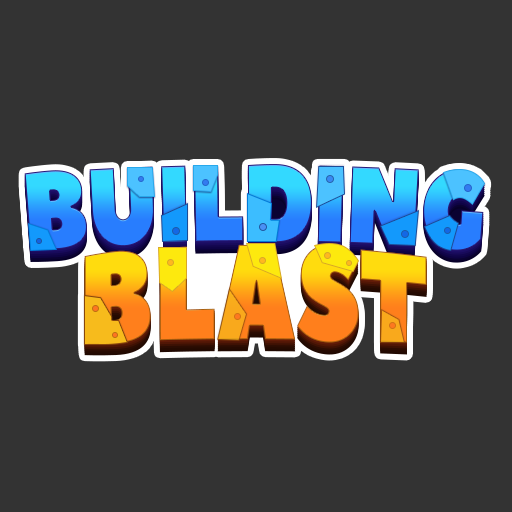
<style>
.page{position:relative;width:512px;height:512px;background:#333333}
.page>*{position:absolute;margin:0}
.t1{font:109.7px "PeaceSans";letter-spacing:-0.025em;scale:0.81 1}
.t2{font:123.7px "PeaceSans";scale:0.83 1}
</style>
<div class="page">
<p class="t1" style="left:24px;top:164px;width:461px;height:87px">BUILDING</p>
<p class="t2" style="left:84px;top:244px;width:343px;height:100px">BLAST</p>
</div>
